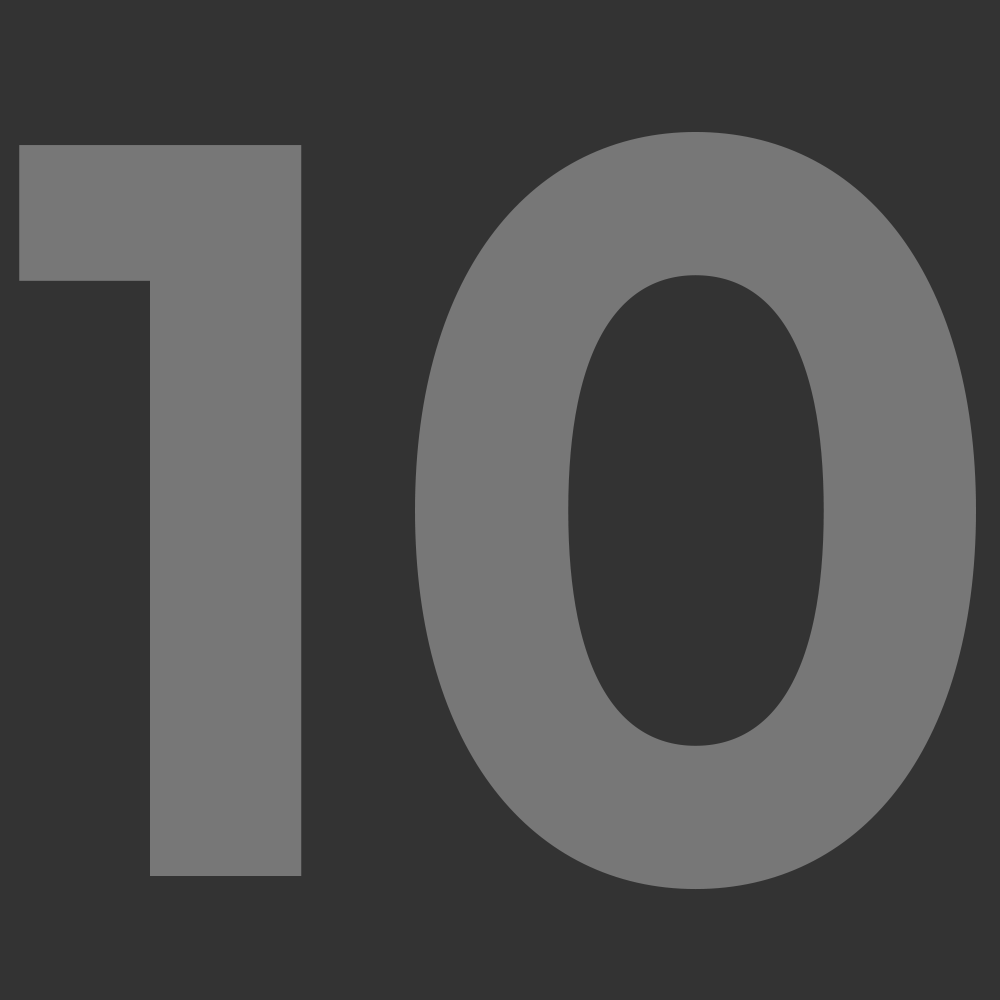
<style>
.page{position:relative;width:1000px;height:1000px;background:#333333}
.page>*{position:absolute;margin:0}
.t1{font:1044.9px "Montserrat-Bold";color:#777777;scale:0.89 1}
</style>
<div class="page">
<p class="t1" style="left:19px;top:132px;width:957px;height:758px">10</p>
</div>
